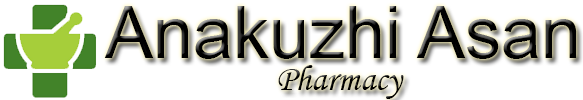
<style>
.page{position:relative;width:583px;height:100px;background:#ffffff}
.page>*{position:absolute;margin:0}
.t1{font:72px "ArialMT";color:#000000}
.t2{font:36px "MonotypeCorsiva"}
</style>
<div class="page">
<p class="t1" style="left:104px;top:6px;width:473px;height:53px">Anakuzhi Asan</p>
<p class="t2" style="left:278px;top:65px;width:126px;height:34px">Pharmacy</p>
</div>
